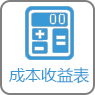
<style>
.page{position:relative;width:95px;height:95px;background:#ffffff}
.page>*{position:absolute;margin:0}
.t1{font:16px "MicrosoftYaHei";color:#3998d6}
</style>
<div class="page">
<p class="t1" style="left:9px;top:67px;width:80px;height:17px">成本收益表</p>
</div>
